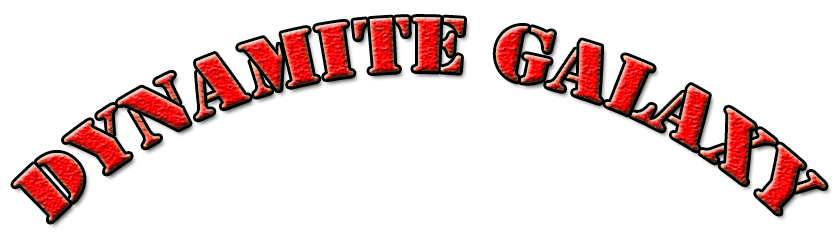
<style>
.page{position:relative;width:840px;height:250px;background:#ffffff}
.page>*{position:absolute;margin:0}
.t1{font:72px "StencilStd"}
</style>
<div class="page">
<p class="t1" style="left:13px;top:17px;width:813px;height:205px">Dynamite Galaxy</p>
</div>
